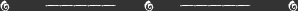
<style>
.page{position:relative;width:298px;height:11px;background:#333333}
.page>*{position:absolute;margin:0}
.t1{font:28px "Gigi-Regular";color:#ffffff}
</style>
<div class="page">
<p class="t1" style="left:0px;top:0px;width:298px;height:11px">o    o    o</p>
<p class="t1" style="left:45px;top:5px;width:206px;height:2px">_____           _____</p>
</div>
